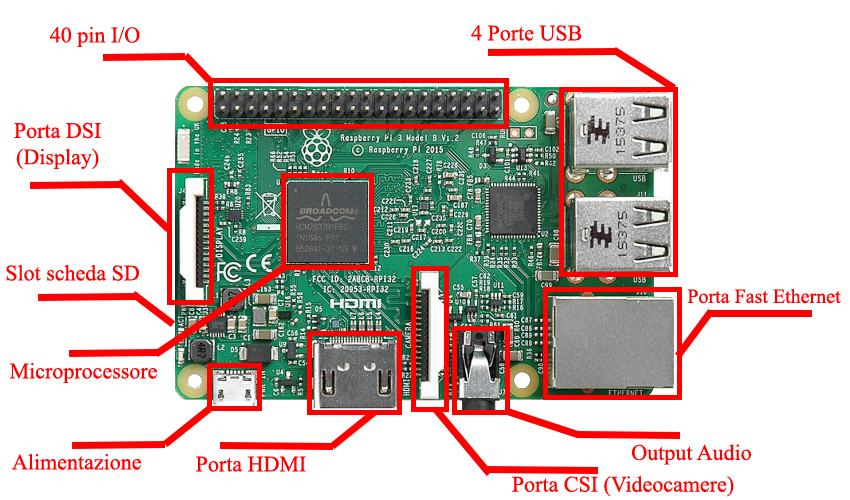
<style>
.page{position:relative;width:850px;height:500px;background:#ffffff}
.page>*{position:absolute;margin:0}
.t1{font:22px "TimesNewRomanPSMT";color:#ff0000}
.t2{font:20px "TimesNewRomanPSMT";color:#ff0000}
</style>
<div class="page">
<p class="t1" style="left:50px;top:27px;width:90px;height:20px">40 pin I/O</p>
<p class="t1" style="left:471px;top:25px;width:111px;height:16px">4 Porte USB</p>
<p class="t1" style="left:14px;top:122px;width:87px;height:47px;text-align:center">Porta DSI (Display)</p>
<p class="t1" style="left:6px;top:265px;width:133px;height:16px">Slot scheda SD</p>
<p class="t2" style="left:687px;top:289px;width:154px;height:15px">Porta Fast Ethernet</p>
<p class="t1" style="left:9px;top:363px;width:148px;height:20px">Microprocessore</p>
<p class="t1" style="left:632px;top:444px;width:119px;height:21px">Output Audio</p>
<p class="t1" style="left:12px;top:454px;width:129px;height:16px">Alimentazione</p>
<p class="t1" style="left:196px;top:456px;width:110px;height:16px">Porta HDMI</p>
<p class="t1" style="left:512px;top:476px;width:222px;height:21px">Porta CSI (Videocamere)</p>
</div>
